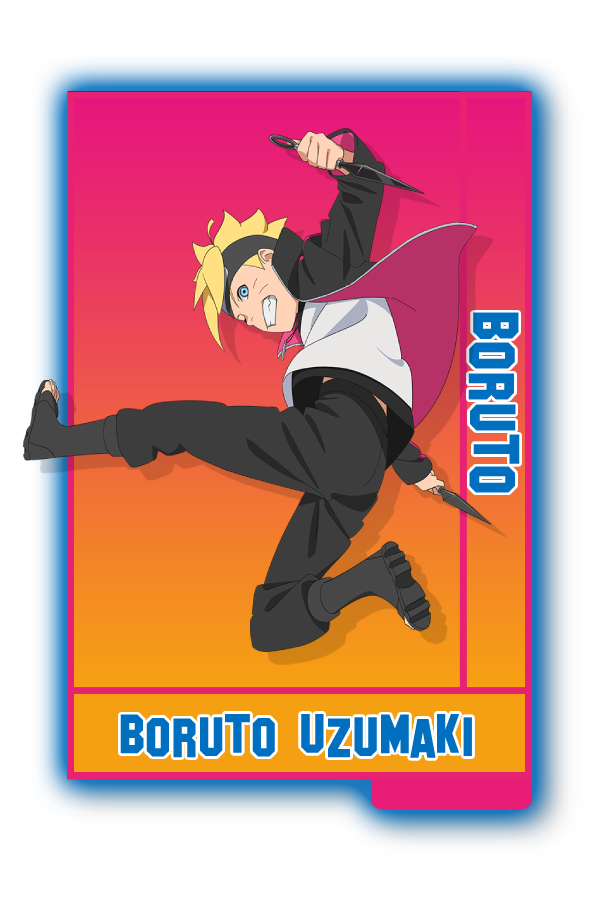
<style>
.page{position:relative;width:600px;height:900px;background:#ffffff}
.page>*{position:absolute;margin:0}
.t1{font:64.7px "SFHollywoodHills";color:#016fbf}
.t2{font:55.4px "SFHollywoodHills";color:#016fbf}
</style>
<div class="page">
<p class="t1" style="left:468px;top:312px;width:52px;height:181px;rotate:90deg">Boruto</p>
<p class="t2" style="left:120px;top:714px;width:352px;height:44px">Boruto Uzumaki</p>
</div>
